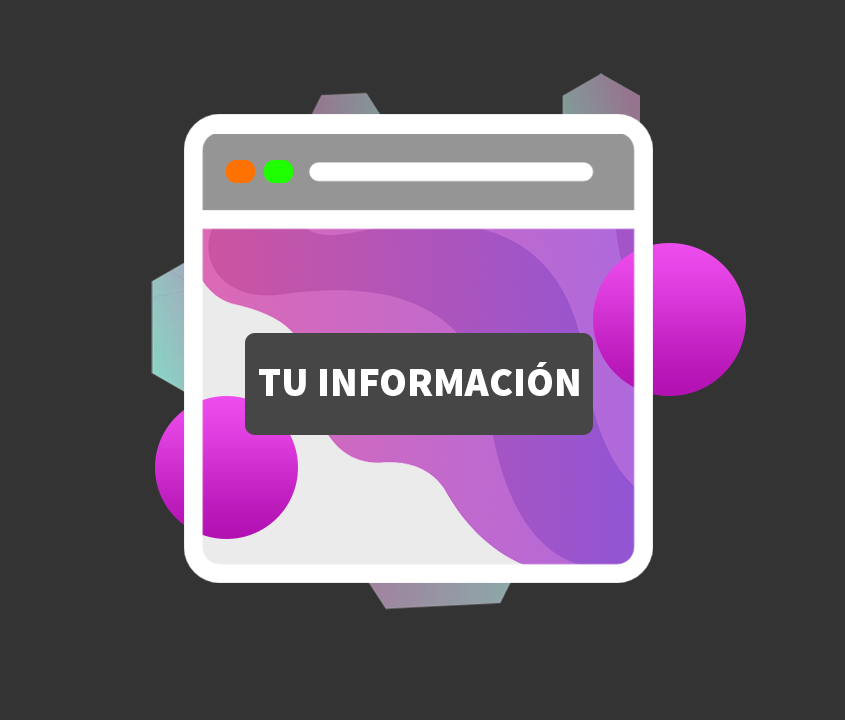
<style>
.page{position:relative;width:845px;height:720px;background:#333333}
.page>*{position:absolute;margin:0}
.t1{font:41px "SourceSansPro-Black";color:#ffffff}
</style>
<div class="page">
<p class="t1" style="left:259px;top:362px;width:320px;height:34px">TU INFORMACIÓN</p>
</div>
